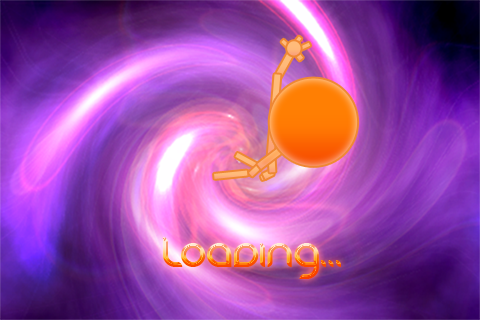
<style>
.page{position:relative;width:480px;height:320px}
.page>*{position:absolute;margin:0}
.t1{font:30px "Danube"}
</style>
<div class="page">
<p class="t1" style="left:163px;top:237px;width:178px;height:42px">loading...</p>
</div>
